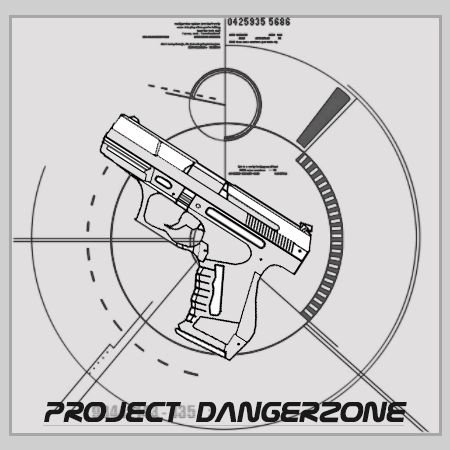
<style>
.page{position:relative;width:450px;height:450px;background:#e1dfdf}
.page>*{position:absolute;margin:0}
.t1{font:30px "Nasalization";color:#191919;font-style:italic;text-decoration:underline;scale:1.05 1}
</style>
<div class="page">
<p class="t1" style="left:43px;top:401px;width:364px;height:25px">Project Dangerzone</p>
</div>
